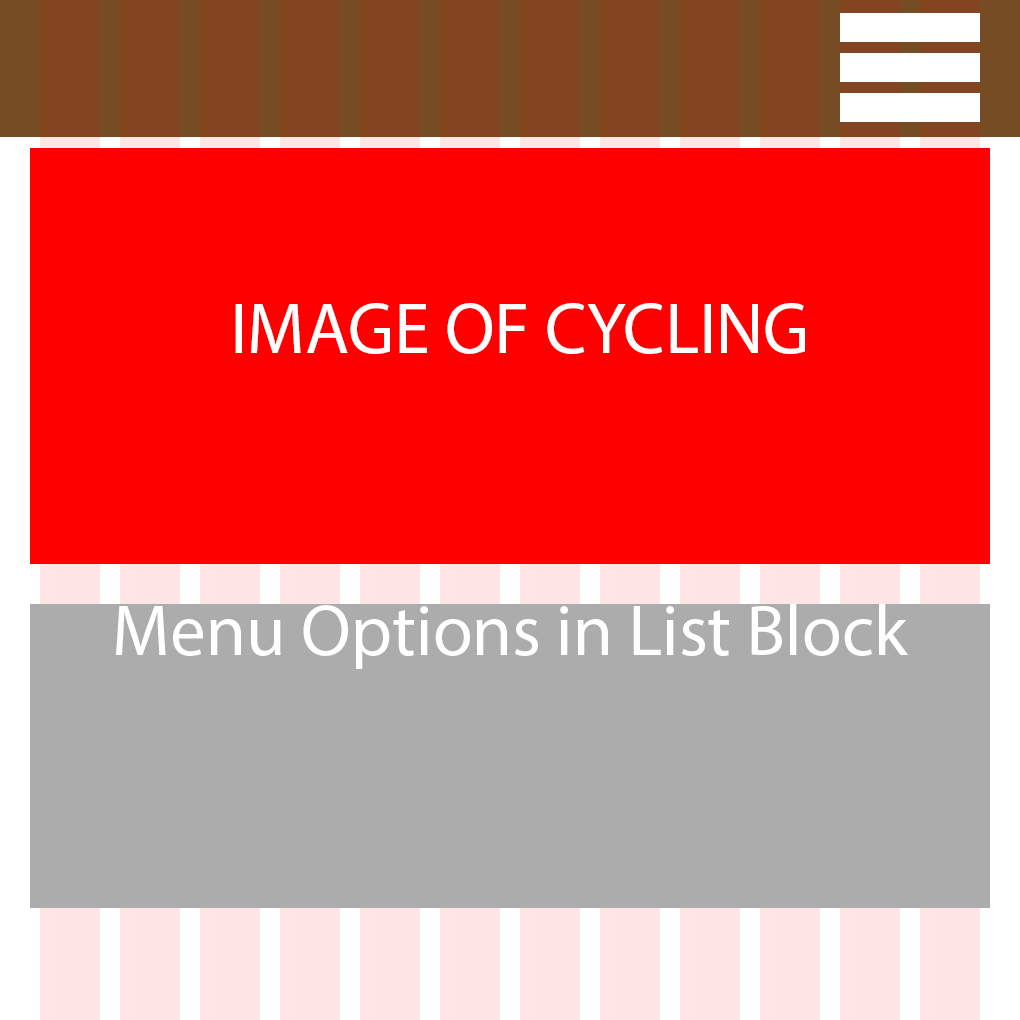
<style>
.page{position:relative;width:1020px;height:1020px;background:#ff0000}
.page>*{position:absolute;margin:0}
.t1{font:72px "MyriadPro-Regular";color:#ffffff}
</style>
<div class="page">
<p class="t1" style="left:235px;top:303px;width:570px;height:51px">IMAGE OF CYCLING</p>
<p class="t1" style="left:116px;top:604px;width:793px;height:65px">Menu Options in List Block</p>
</div>
